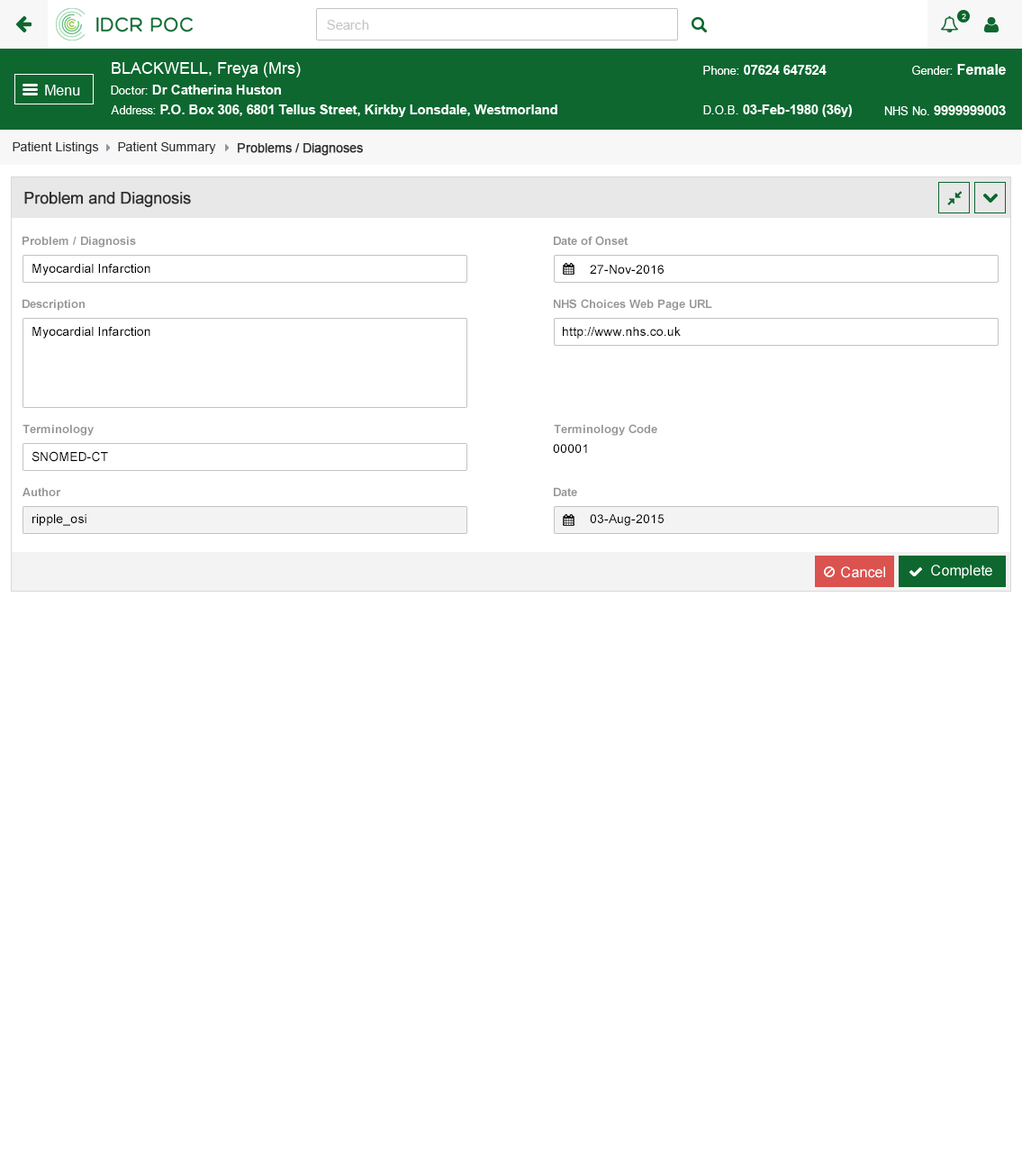
<style>
.page{position:relative;width:1022px;height:1167px;background:#ffffff}
.page>*{position:absolute;margin:0}
.t1{font:12.6px "ArialMT";color:#313131}
.t2{font:12.6px "ArialMT";color:#313131;font-weight:bold}
.t3{font:16.2px "ArialMT";color:#303030;font-weight:bold}
.t4{font:11.7px "Arial-BoldMT";color:#959595}
.t5{font:12.6px "ArialMT";color:#000000}
</style>
<div class="page">
<p class="t1" style="left:13px;top:141px;width:86px;height:13px">Patient Listings</p>
<p class="t1" style="left:118px;top:141px;width:98px;height:13px">Patient Summary</p>
<p class="t2" style="left:238px;top:143px;width:125px;height:13px">Problems / Diagnoses</p>
<p class="t3" style="left:24px;top:192px;width:167px;height:15px">Problem and Diagnosis</p>
<p class="t4" style="left:23px;top:236px;width:113px;height:12px">Problem / Diagnosis</p>
<p class="t4" style="left:554px;top:236px;width:74px;height:10px">Date of Onset</p>
<p class="t5" style="left:32px;top:264px;width:118px;height:12px">Myocardial Infarction</p>
<p class="t5" style="left:590px;top:265px;width:74px;height:9px">27-Nov-2016</p>
<p class="t4" style="left:23px;top:299px;width:62px;height:12px">Description</p>
<p class="t4" style="left:554px;top:299px;width:158px;height:12px">NHS Choices Web Page URL</p>
<p class="t5" style="left:32px;top:327px;width:118px;height:12px">Myocardial Infarction</p>
<p class="t5" style="left:563px;top:327px;width:118px;height:12px">http://www.nhs.co.uk</p>
<p class="t4" style="left:23px;top:424px;width:71px;height:12px">Terminology</p>
<p class="t4" style="left:554px;top:424px;width:103px;height:12px">Terminology Code</p>
<p class="t5" style="left:553px;top:444px;width:34px;height:9px">00001</p>
<p class="t5" style="left:32px;top:451px;width:76px;height:11px">SNOMED-CT</p>
<p class="t4" style="left:23px;top:487px;width:38px;height:9px">Author</p>
<p class="t4" style="left:554px;top:487px;width:23px;height:9px">Date</p>
<p class="t5" style="left:32px;top:514px;width:54px;height:12px">ripple_osi</p>
<p class="t5" style="left:590px;top:514px;width:74px;height:12px">03-Aug-2015</p>
</div>
